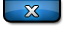
<style>
.page{position:relative;width:64px;height:32px;background:#ffffff}
.page>*{position:absolute;margin:0}
.t1{font:19.2px "Kalinga-Bold";font-weight:bold;scale:1.25 1}
</style>
<div class="page">
<p class="t1" style="left:25px;top:6px;width:14px;height:11px">x</p>
</div>
